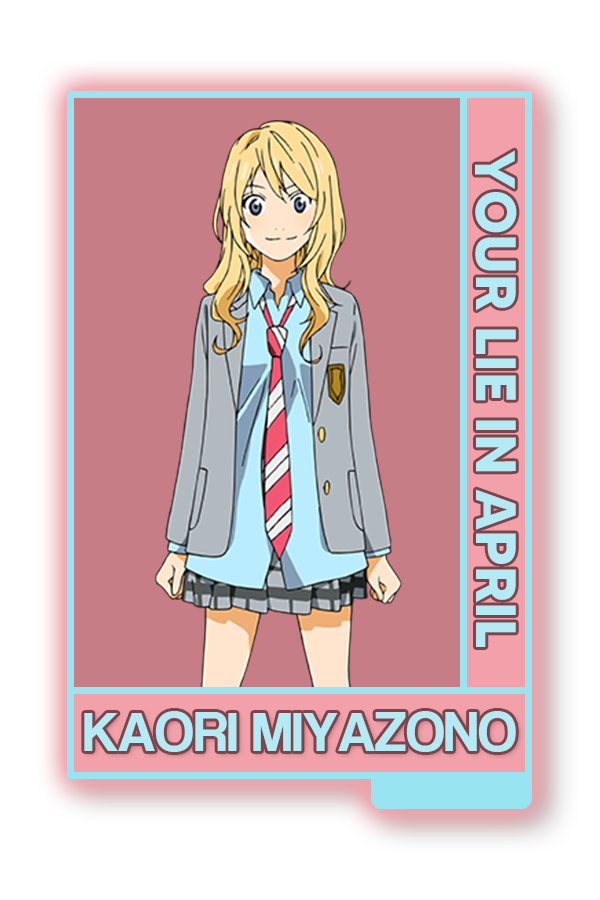
<style>
.page{position:relative;width:600px;height:900px;background:#c77d85}
.page>*{position:absolute;margin:0}
.t1{font:56.7px "MADETOMMY-Bold";color:#b3eaf4}
.t2{font:57.8px "CoolveticaRg-Regular";color:#b3eaf4}
</style>
<div class="page">
<p class="t1" style="left:475px;top:150px;width:42px;height:497px;rotate:90deg">YOUR LIE IN APRIL</p>
<p class="t2" style="left:84px;top:711px;width:432px;height:41px">KAORI MIYAZONO</p>
</div>
